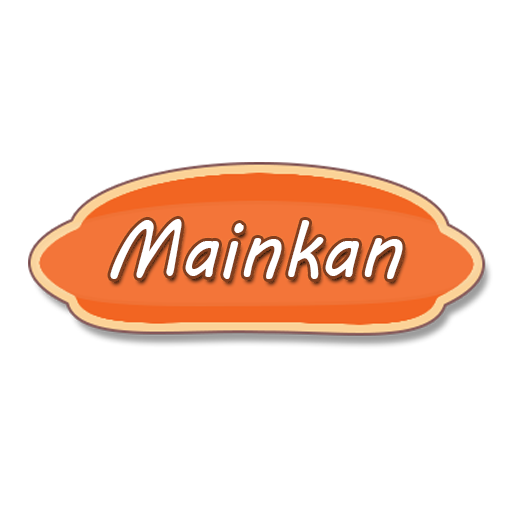
<style>
.page{position:relative;width:512px;height:512px;background:#ffffff}
.page>*{position:absolute;margin:0}
.t1{font:79.8px "MVBoli";color:#ffffff}
</style>
<div class="page">
<p class="t1" style="left:110px;top:219px;width:293px;height:60px">Mainkan</p>
</div>
